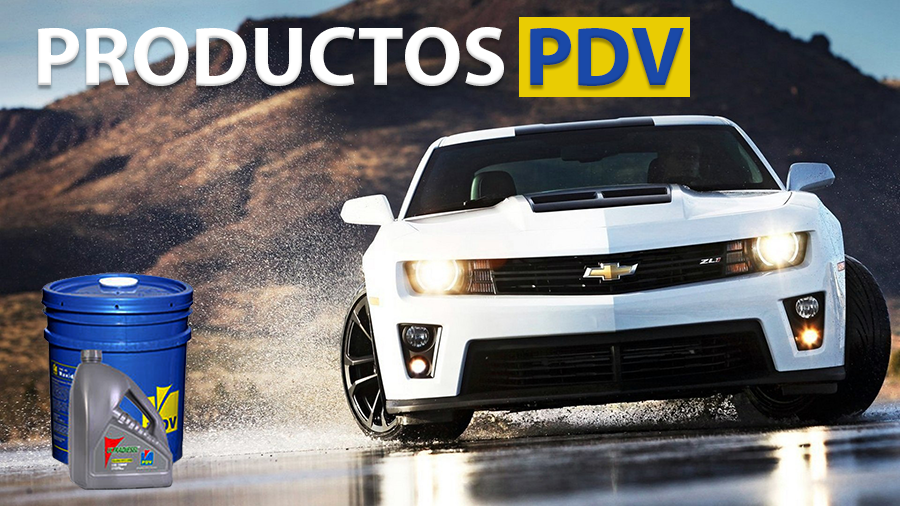
<style>
.page{position:relative;width:900px;height:506px}
.page>*{position:absolute;margin:0}
.t1{font:84px "MyriadPro-Bold";color:#ffffff}
.t2{font:84px "MyriadPro-Bold";color:#1a49a8}
</style>
<div class="page">
<p class="t1" style="left:38px;top:27px;width:646px;height:59px">PRODUCTOS <span class="t2">PDV</span></p>
</div>
